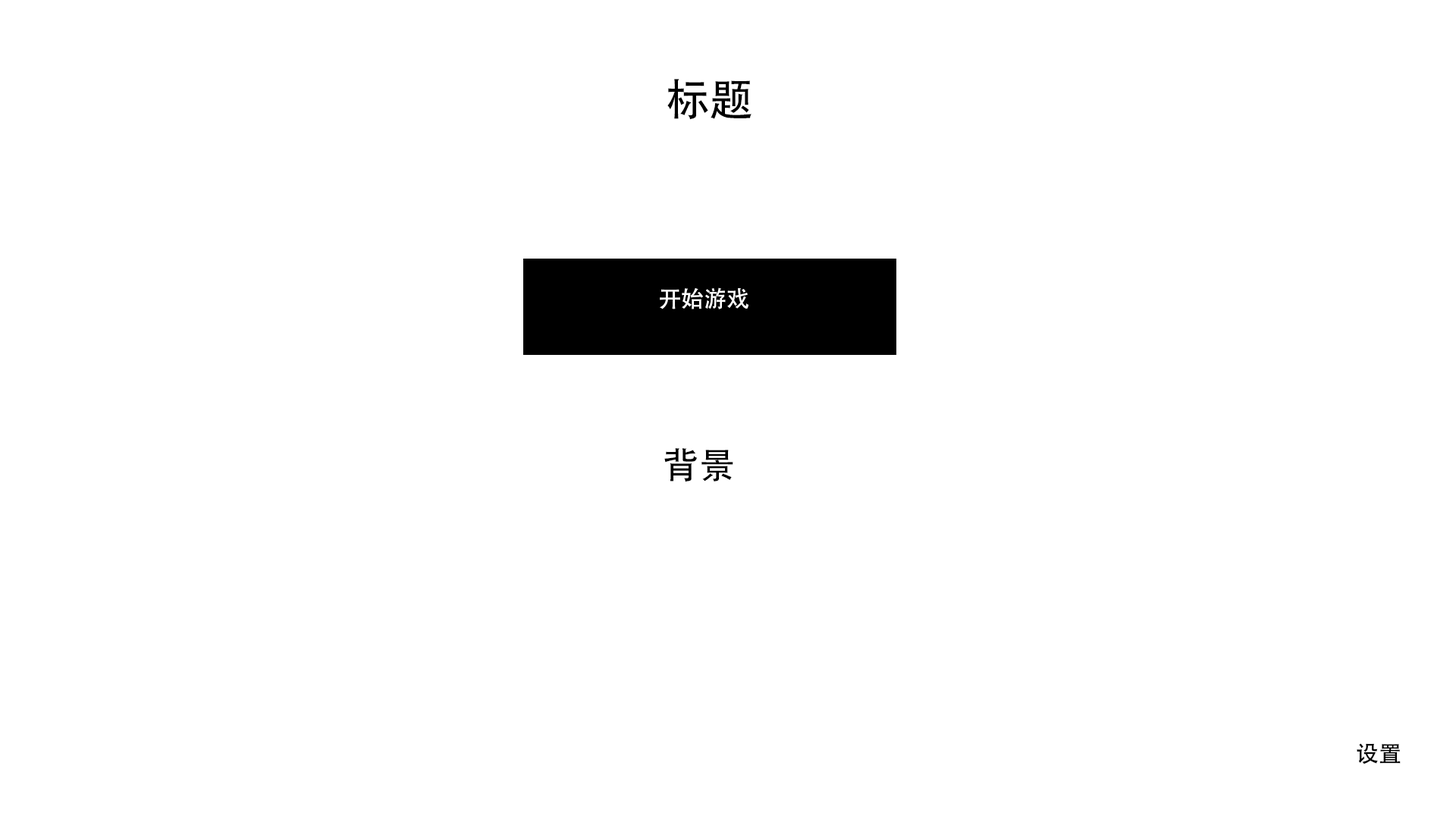
<style>
.page{position:relative;width:1456px;height:819px;background:#ffffff}
.page>*{position:absolute;margin:0}
.t1{font:44px "AdobeHeitiStd-Regular";color:#000000}
.t2{font:22.7px "AdobeHeitiStd-Regular";color:#ffffff}
.t3{font:36.4px "AdobeHeitiStd-Regular";color:#000000}
.t4{font:22.7px "AdobeHeitiStd-Regular";color:#000000}
</style>
<div class="page">
<p class="t1" style="left:667px;top:79px;width:84px;height:41px">标题</p>
<p class="t2" style="left:660px;top:287px;width:88px;height:22px">开始游戏</p>
<p class="t3" style="left:664px;top:448px;width:69px;height:34px">背景</p>
<p class="t4" style="left:1357px;top:743px;width:44px;height:21px">设置</p>
</div>
